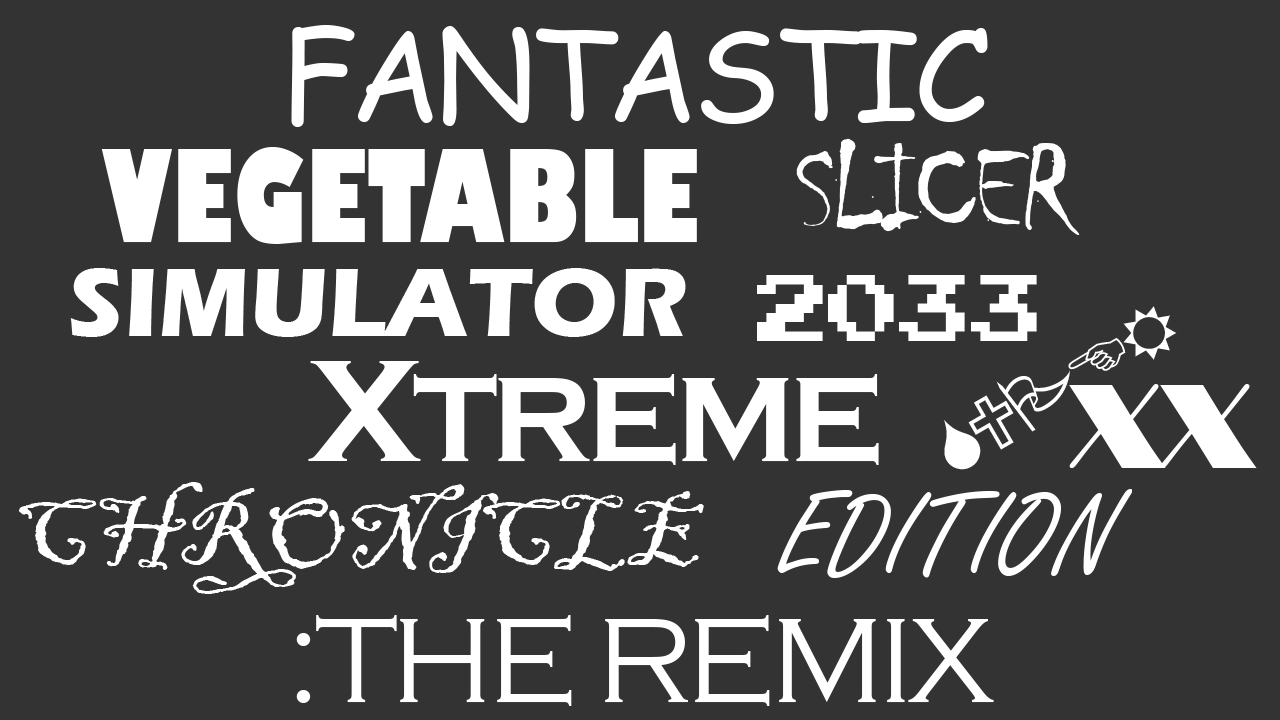
<style>
.page{position:relative;width:1280px;height:720px;background:#333333}
.page>*{position:absolute;margin:0}
.t1{font:125px "ComicSansMS";letter-spacing:-0.05em;color:#ffffff}
.t2{font:125px "GillSans-UltraBoldCondensed";color:#ffffff}
.t3{font:125px "Chiller-Regular";letter-spacing:-0.05em;color:#ffffff}
.t4{font:100px "ErasITC-Bold";color:#ffffff}
.t5{font:75px "PressStart2P-Regular";letter-spacing:-0.05em;color:#ffffff}
.t6{font:125px "CopperplateGothic-Bold";letter-spacing:-0.05em;color:#ffffff}
.t7{font:150px "CopperplateGothic-Bold";letter-spacing:-0.05em;color:#ffffff}
.t8{font:125px "Broadway";letter-spacing:-0.05em;color:#ffffff}
.t9{font:100px "BlackadderITC-Regular";color:#ffffff}
.t10{font:125px "FreestyleScript-Regular";color:#ffffff}
.t11{font:125px "CopperplateGothic-Light";letter-spacing:-0.05em;color:#ffffff}
</style>
<div class="page">
<p class="t1" style="left:291px;top:25px;width:697px;height:102px">FANTASTIC</p>
<p class="t2" style="left:101px;top:147px;width:596px;height:97px">VEGETABLE</p>
<p class="t3" style="left:796px;top:138px;width:284px;height:97px">SLICER</p>
<p class="t4" style="left:70px;top:268px;width:616px;height:69px">SIMULATOR</p>
<p class="t5" style="left:757px;top:275px;width:280px;height:66px">2033</p>
<p class="t6" style="left:308px;top:361px;width:571px;height:104px"><span class="t7">X</span>TREME</p>
<p class="t8" style="left:1069px;top:384px;width:188px;height:84px">XX</p>
<p class="t9" style="left:18px;top:482px;width:686px;height:112px">CHRONICLE</p>
<p class="t10" style="left:777px;top:489px;width:355px;height:89px">EDITION</p>
<p class="t11" style="left:296px;top:615px;width:698px;height:91px">:THE REMIX</p>
</div>
